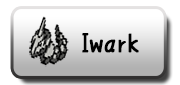
<style>
.page{position:relative;width:180px;height:85px;background:#ffffff}
.page>*{position:absolute;margin:0}
.t1{font:32.6px "WRTishKid";color:#000000;font-weight:bold}
</style>
<div class="page">
<p class="t1" style="left:82px;top:33px;width:57px;height:20px">Iwark</p>
</div>
